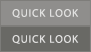
<style>
.page{position:relative;width:91px;height:52px;background:#8f8e8c}
.page>*{position:absolute;margin:0}
.t1{font:11px "MyriadPro-Regular";letter-spacing:0.075em;color:#e1e1e0}
</style>
<div class="page">
<p class="t1" style="left:12px;top:9px;width:67px;height:9px">QUICK LOOK</p>
<p class="t1" style="left:12px;top:35px;width:67px;height:9px">QUICK LOOK</p>
</div>
